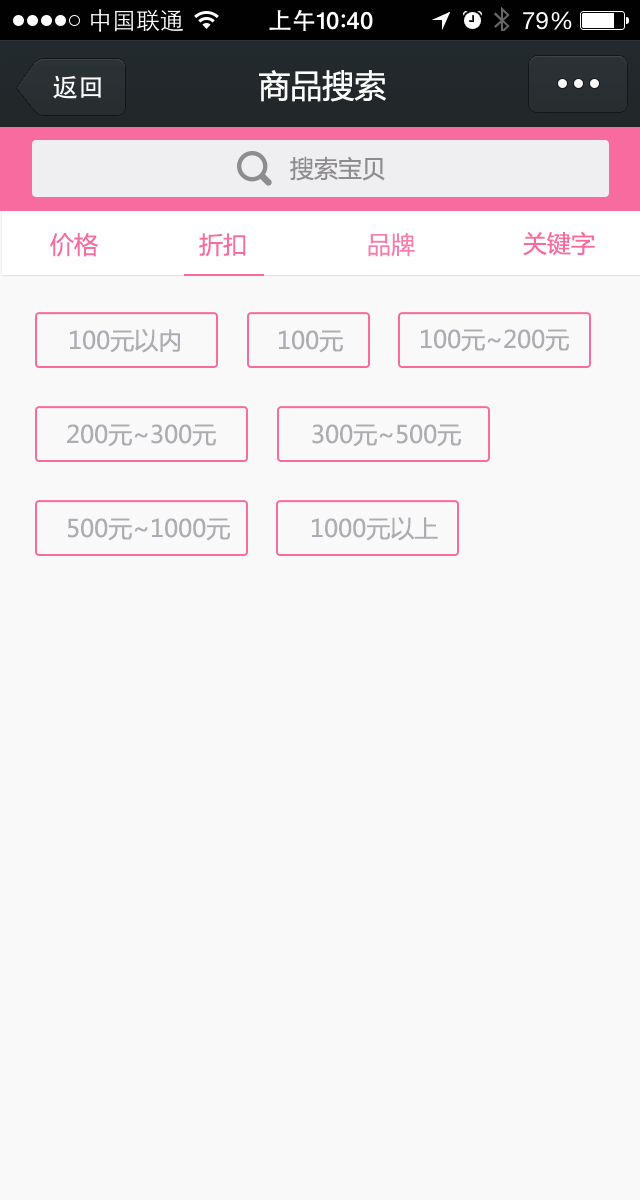
<style>
.page{position:relative;width:640px;height:1200px;background:#faf9f9}
.page>*{position:absolute;margin:0}
.t1{font:32px "MicrosoftYaHei";color:#ffffff}
.t2{font:24px "MicrosoftYaHei";color:#8e8c8f}
.t3{font:24px "MicrosoftYaHei";color:#f86b9f}
.t4{font:24px "MicrosoftYaHei";color:#f87dab}
.t5{font:24px "MicrosoftYaHei";color:#abadb3}
</style>
<div class="page">
<p class="t1" style="left:259px;top:70px;width:127px;height:32px">商品搜索</p>
<p class="t2" style="left:290px;top:156px;width:95px;height:25px">搜索宝贝</p>
<p class="t3" style="left:50px;top:232px;width:48px;height:25px">价格</p>
<p class="t3" style="left:199px;top:233px;width:47px;height:24px">折扣</p>
<p class="t4" style="left:368px;top:232px;width:47px;height:25px">品牌</p>
<p class="t3" style="left:523px;top:231px;width:72px;height:25px">关键字</p>
<p class="t5" style="left:70px;top:329px;width:110px;height:24px">100元以内</p>
<p class="t5" style="left:421px;top:329px;width:148px;height:23px">100元~200元</p>
<p class="t5" style="left:279px;top:330px;width:64px;height:23px">100元</p>
<p class="t5" style="left:67px;top:424px;width:149px;height:23px">200元~300元</p>
<p class="t5" style="left:312px;top:424px;width:149px;height:23px">300元~500元</p>
<p class="t5" style="left:68px;top:518px;width:162px;height:23px">500元~1000元</p>
<p class="t5" style="left:312px;top:517px;width:126px;height:24px">1000元以上</p>
</div>
